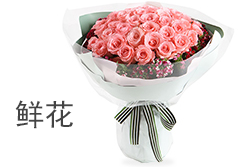
<style>
.page{position:relative;width:238px;height:167px;background:#ffffff}
.page>*{position:absolute;margin:0}
.t1{font:30px "SimHei";color:#444444}
</style>
<div class="page">
<p class="t1" style="left:15px;top:100px;width:58px;height:29px">鲜花</p>
</div>
